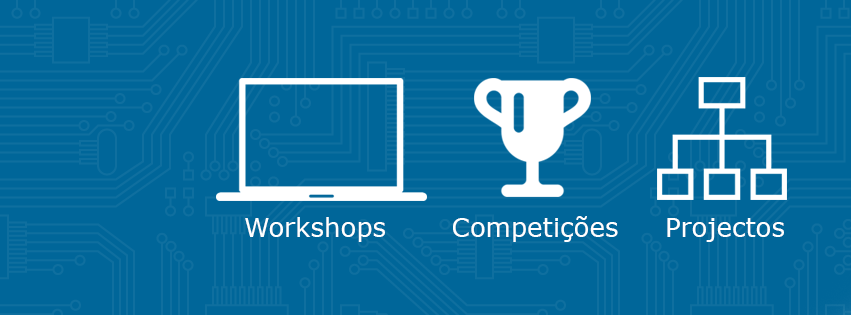
<style>
.page{position:relative;width:851px;height:315px;background:#006699}
.page>*{position:absolute;margin:0}
.t1{font:26px "Verdana";color:#ffffff}
</style>
<div class="page">
<p class="t1" style="left:245px;top:217px;width:140px;height:25px">Workshops</p>
<p class="t1" style="left:453px;top:216px;width:165px;height:26px">Competições</p>
<p class="t1" style="left:667px;top:218px;width:117px;height:24px">Projectos</p>
</div>
